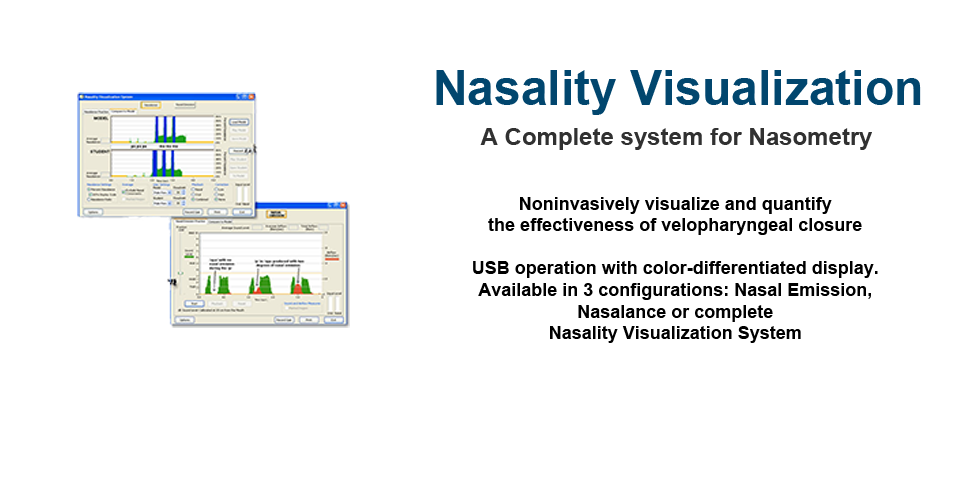
<style>
.page{position:relative;width:960px;height:479px;background:#ffffff}
.page>*{position:absolute;margin:0}
.t1{font:48px "Arial-BoldMT";color:#01466e}
.t2{font:24px "Arial-BoldMT";color:#313131}
.t3{font:18px "Arial-BoldMT";color:#000000}
</style>
<div class="page">
<p class="t1" style="left:436px;top:70px;width:485px;height:45px">Nasality Visualization</p>
<p class="t2" style="left:480px;top:128px;width:392px;height:22px">A Complete system for Nasometry</p>
<p class="t3" style="left:473px;top:197px;width:405px;height:146px;text-align:center">Noninvasively visualize and quantify<br>the effectiveness of velopharyngeal closure<br><br>USB operation with color-differentiated display.<br>Available in 3 configurations: Nasal Emission, Nasalance or complete<br>Nasality Visualization System</p>
</div>
